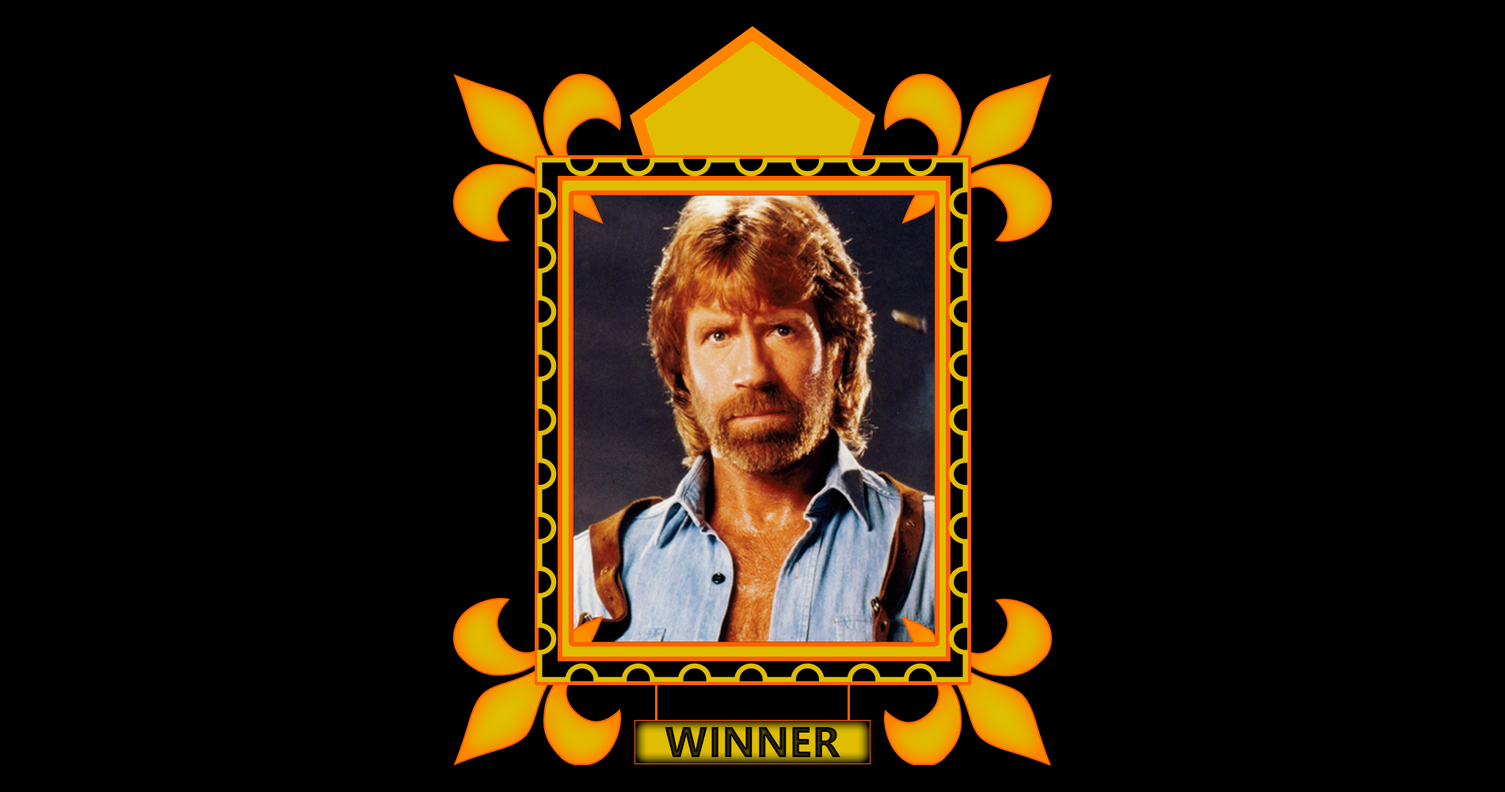
<style>
.page{position:relative;width:1505px;height:792px;background:#000000}
.page>*{position:absolute;margin:0}
.t1{font:42.9px "NirmalaUI-Bold";color:#121000}
</style>
<div class="page">
<p class="t1" style="left:665px;top:727px;width:176px;height:30px">WINNER</p>
</div>
